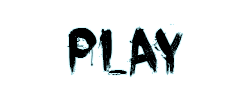
<style>
.page{position:relative;width:250px;height:100px;background:#ffffff}
.page>*{position:absolute;margin:0}
.t1{font:60px "FaceYourFears";color:#0e0e0e}
</style>
<div class="page">
<p class="t1" style="left:67px;top:24px;width:116px;height:53px">PLay</p>
</div>
